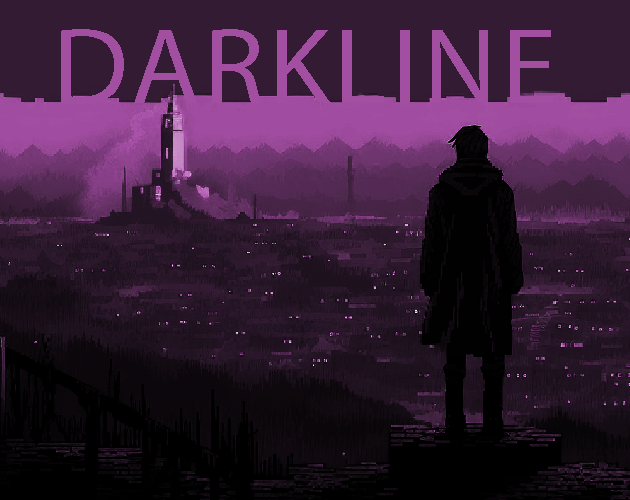
<style>
.page{position:relative;width:630px;height:500px}
.page>*{position:absolute;margin:0}
.t1{font:108px "MyriadPro-Regular";letter-spacing:0.04em;color:#a24fa2;scale:1.04 1}
</style>
<div class="page">
<p class="t1" style="left:61px;top:29px;width:492px;height:75px">DARKLINE</p>
</div>
